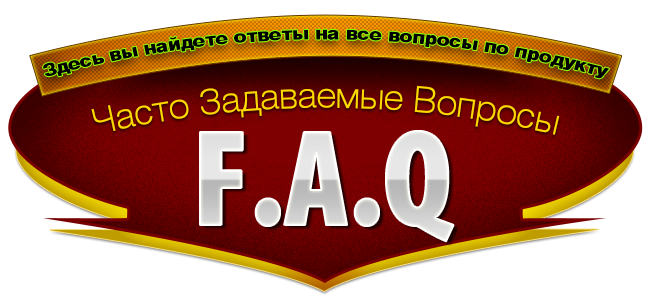
<style>
.page{position:relative;width:650px;height:300px;background:#ffffff}
.page>*{position:absolute;margin:0}
.t1{font:18px "Helvetica-9-Black";letter-spacing:-0.025em;color:#000000;scale:1.1 1}
.t2{font:36px "Helvetica-4-Light";letter-spacing:-0.01em;color:#ffd800}
.t3{font:138.2px "MyriadPro-BlackCond"}
</style>
<div class="page">
<p class="t1" style="left:43px;top:29px;width:567px;height:50px">Здесь вы найдете ответы на все вопросы по продукту</p>
<p class="t2" style="left:91px;top:85px;width:469px;height:50px">Часто Задаваемые Вопросы</p>
<p class="t3" style="left:200px;top:131px;width:254px;height:111px">F.A.Q</p>
</div>
